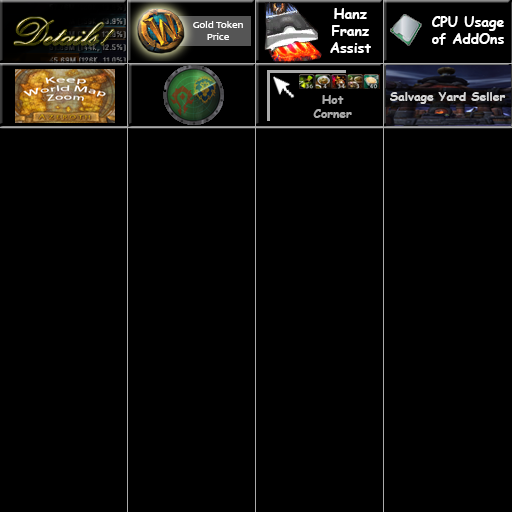
<style>
.page{position:relative;width:512px;height:512px;background:#000000}
.page>*{position:absolute;margin:0}
.t1{font:38.1px "Exmouth"}
.t2{font:14px "ComicSansMS-Bold";color:#ffffff}
.t3{font:10px "Candara";color:#ffffff;scale:1.07 1}
.t4{font:10px "Candara";color:#5f5f5f;scale:1.07 1}
.t5{font:12px "ComicSansMS-Bold";color:#aaaaaa}
.t6{font:12px "ComicSansMS-Bold";color:#d5d5d5}
</style>
<div class="page">
<p class="t1" style="left:14px;top:17px;width:100px;height:28px">Details!</p>
<p class="t2" style="left:330px;top:8px;width:41px;height:45px;text-align:center">Hanz<br>Franz<br>Assist</p>
<p class="t2" style="left:432px;top:16px;width:72px;height:29px;text-align:center">CPU Usage<br>of AddOns</p>
<p class="t3" style="left:193px;top:21px;width:50px;height:19px;text-align:center"><span class="t4"><br></span>Gold Token<br>Price</p>
<p class="t5" style="left:313px;top:95px;width:39px;height:23px;text-align:center">Hot<br>Corner</p>
<p class="t6" style="left:390px;top:92px;width:116px;height:12px">Salvage Yard Seller</p>
</div>
